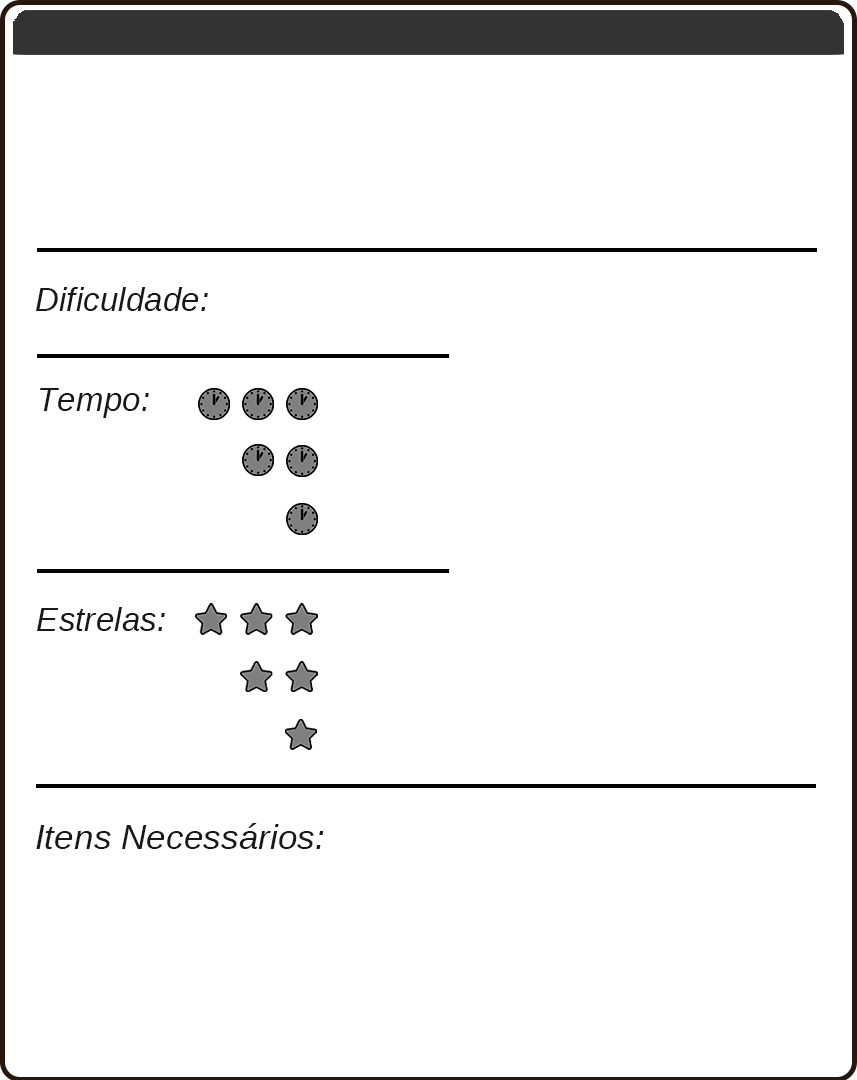
<style>
.page{position:relative;width:857px;height:1080px;background:#ffffff}
.page>*{position:absolute;margin:0}
.t1{font:33.3px "LiberationSans-Italic";color:#181818}
.t2{font:35.3px "LiberationSans-Italic";color:#181818}
</style>
<div class="page">
<p class="t1" style="left:36px;top:287px;width:172px;height:24px">Dificuldade:</p>
<p class="t1" style="left:40px;top:388px;width:109px;height:30px">Tempo:</p>
<p class="t1" style="left:37px;top:607px;width:128px;height:24px">Estrelas:</p>
<p class="t2" style="left:36px;top:823px;width:288px;height:26px">Itens Necessários:</p>
</div>
